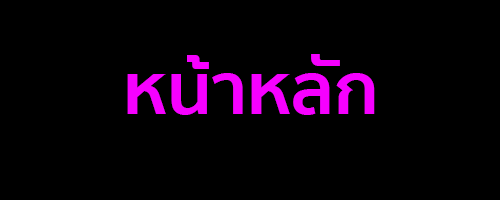
<style>
.page{position:relative;width:500px;height:200px;background:#000000}
.page>*{position:absolute;margin:0}
.t1{font:72px "SukhumvitSet-Bold";color:#f600ff}
</style>
<div class="page">
<p class="t1" style="left:127px;top:54px;width:248px;height:61px">หน้าหลัก</p>
</div>
